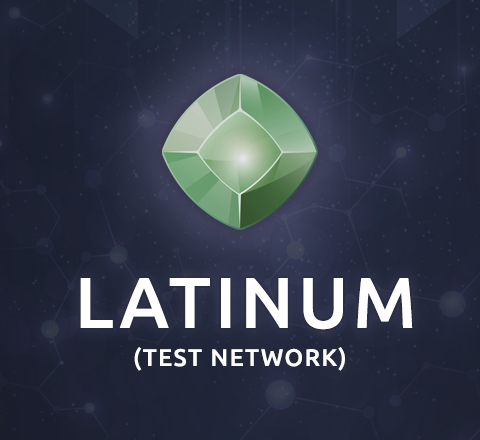
<style>
.page{position:relative;width:480px;height:440px}
.page>*{position:absolute;margin:0}
.t1{font:72px "Ubuntu-Medium";letter-spacing:0.06em;color:#ffffff}
.t2{font:24px "Ubuntu-Medium";letter-spacing:0.06em;color:#ffffff}
</style>
<div class="page">
<p class="t1" style="left:80px;top:278px;width:333px;height:52px">LATINUM</p>
<p class="t2" style="left:134px;top:347px;width:211px;height:24px">(TEST NETWORK)</p>
</div>
